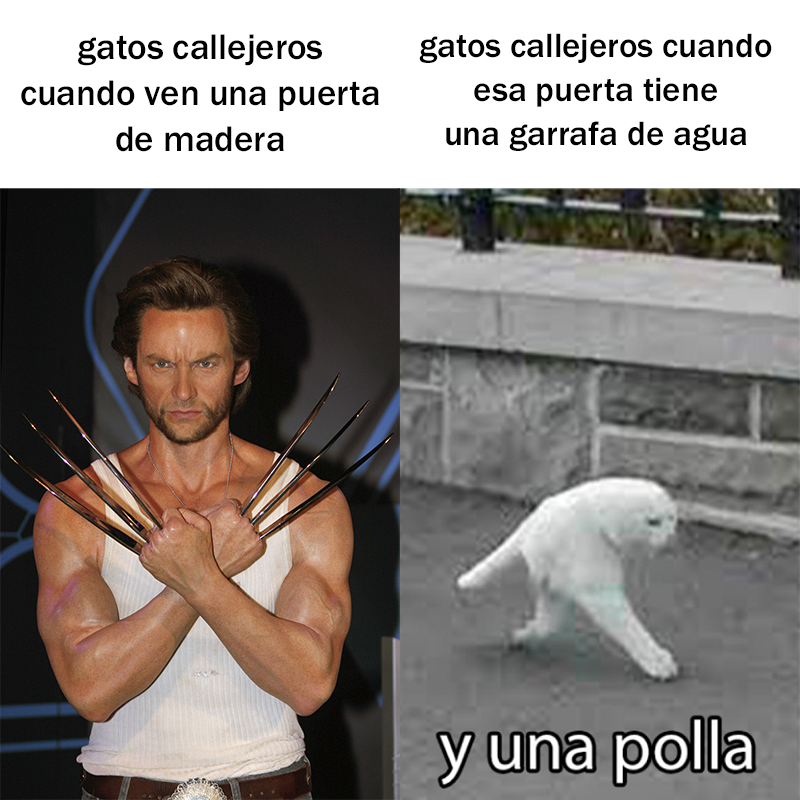
<style>
.page{position:relative;width:800px;height:800px;background:#ffffff}
.page>*{position:absolute;margin:0}
.t1{font:36.7px "FranklinGothic-Medium";color:#000000}
.t2{font:35px "FranklinGothic-Medium";color:#000000}
</style>
<div class="page">
<p class="t1" style="left:21px;top:34px;width:358px;height:118px;text-align:center">gatos callejeros<br>cuando ven una puerta<br>de madera</p>
<p class="t2" style="left:419px;top:33px;width:353px;height:118px;text-align:center">gatos callejeros cuando<br>esa puerta tiene<br>una garrafa de agua</p>
</div>
